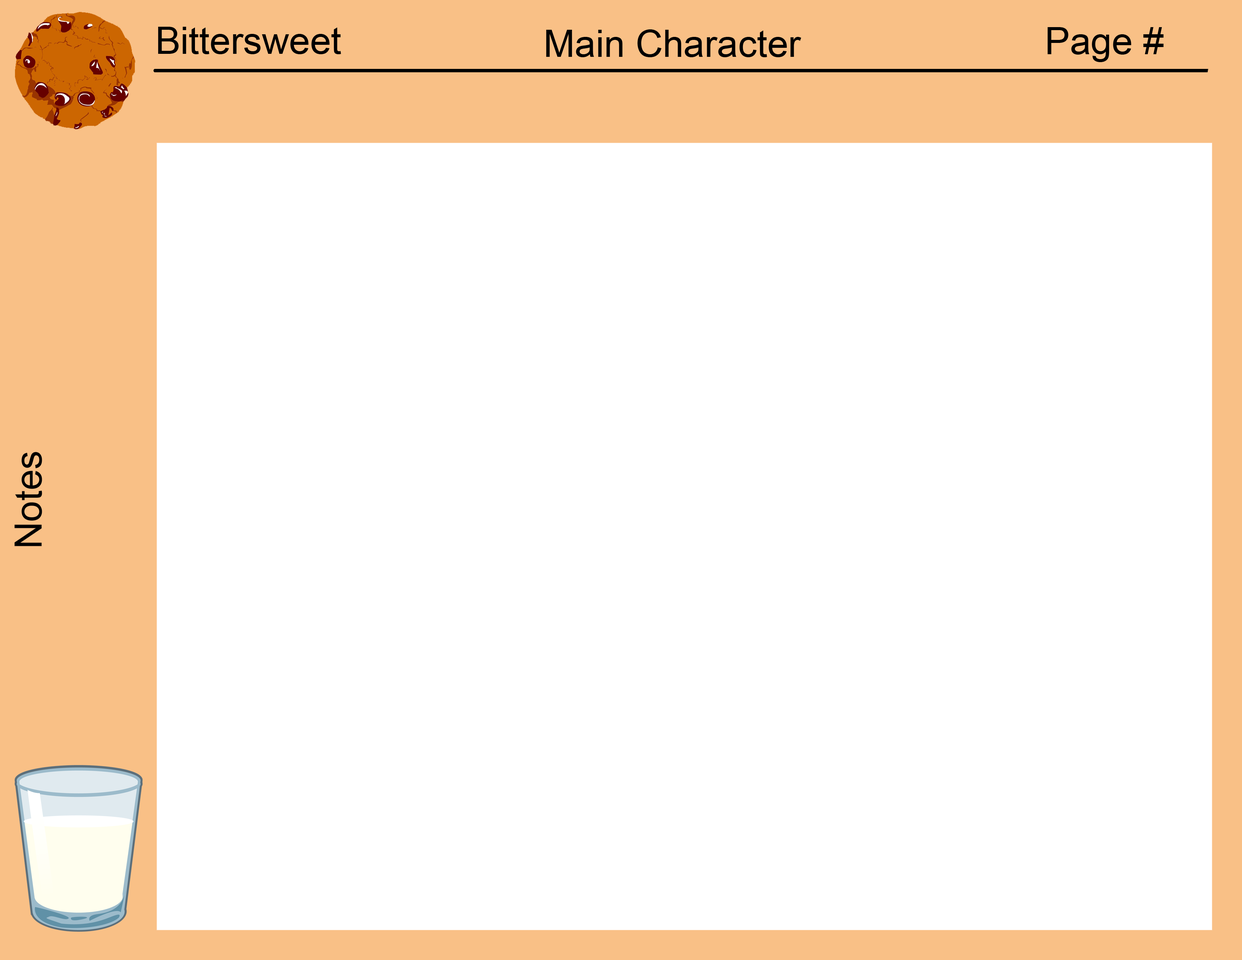
<style>
.page{position:relative;width:1242px;height:960px;background:#ffffff}
.page>*{position:absolute;margin:0}
.t1{font:37.6px "ArialMT";color:#000000}
</style>
<div class="page">
<p class="t1" style="left:158px;top:27px;width:183px;height:27px">Bittersweet</p>
<p class="t1" style="left:546px;top:29px;width:255px;height:28px">Main Character</p>
<p class="t1" style="left:1048px;top:27px;width:116px;height:35px">Page #</p>
<p class="t1" style="left:14px;top:452px;width:28px;height:94px;rotate:-90deg">Notes</p>
</div>
